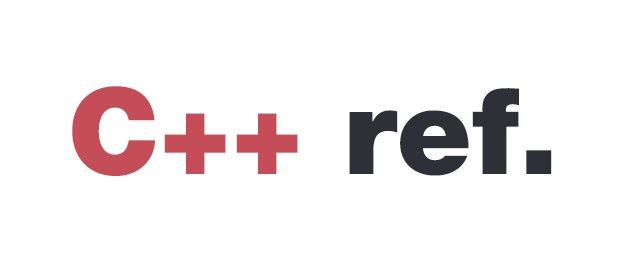
<style>
.page{position:relative;width:640px;height:265px;background:#ffffff}
.page>*{position:absolute;margin:0}
.t1{font:120px "HelveticaNeueLTPro-Blk";color:#2f2f37}
.t2{font:120px "HelveticaNeueLTPro-Blk";color:#c44d58}
</style>
<div class="page">
<p class="t1" style="left:72px;top:86px;width:480px;height:90px"><span class="t2">C++</span> ref.</p>
</div>
